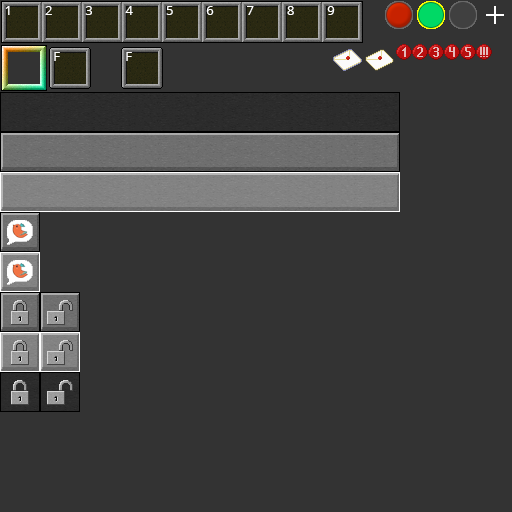
<style>
.page{position:relative;width:512px;height:512px;background:#333333}
.page>*{position:absolute;margin:0}
.t1{font:13px "OpenSans-Regular";letter-spacing:2.53em;color:#ffffff;text-transform:uppercase}
.t2{font:13px "OpenSans-Regular";color:#ffffff;text-transform:uppercase}
</style>
<div class="page">
<p class="t1" style="left:5px;top:6px;width:330px;height:9px">123456789</p>
<p class="t2" style="left:54px;top:52px;width:6px;height:9px">F</p>
<p class="t2" style="left:126px;top:52px;width:6px;height:9px">F</p>
</div>
